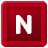
<style>
.page{position:relative;width:48px;height:48px;background:#b30117}
.page>*{position:absolute;margin:0}
.t1{font:24px "Ubuntu-Regular";color:#ffffff}
</style>
<div class="page">
<p class="t1" style="left:17px;top:16px;width:14px;height:17px">N</p>
</div>
